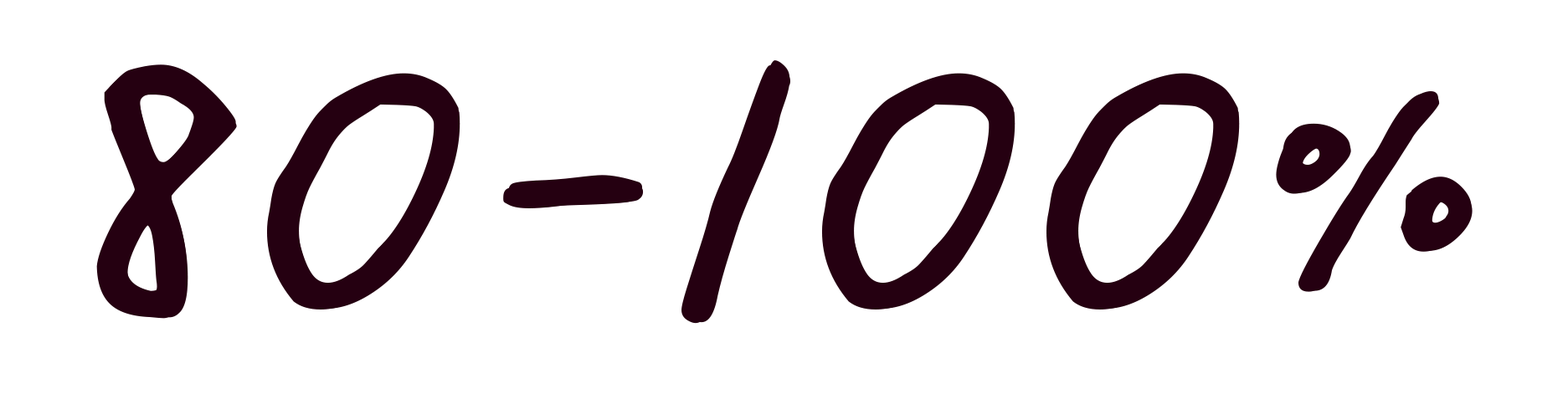
<style>
.page{position:relative;width:1568px;height:394px;background:#ffffff}
.page>*{position:absolute;margin:0}
.t1{font:554.6px "ChenYuluoyan-Thin-Monospaced";color:#250011;text-transform:uppercase}
</style>
<div class="page">
<p class="t1" style="left:96px;top:65px;width:1371px;height:259px">80-100%</p>
<p class="t1" style="left:101px;top:60px;width:1371px;height:259px">80-100%</p>
<p class="t1" style="left:102px;top:64px;width:1371px;height:259px">80-100%</p>
</div>
